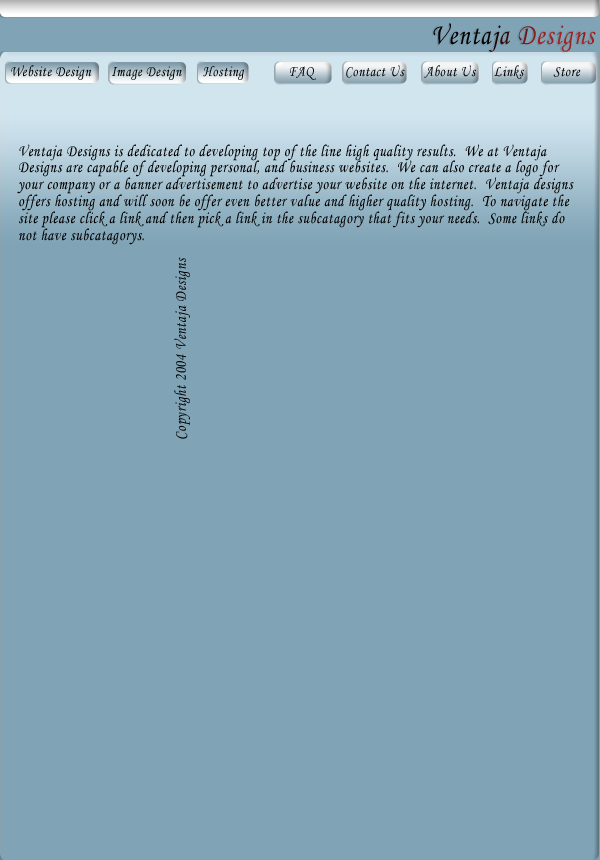
<style>
.page{position:relative;width:600px;height:860px;background:#80a4b6}
.page>*{position:absolute;margin:0}
.t1{font:30px "MonotypeCorsiva";letter-spacing:0.05em;scale:0.83 1}
.t2{font:15.6px "MonotypeCorsiva";letter-spacing:0.05em;color:#000000;scale:0.83 1}
.t3{font:16.8px "MonotypeCorsiva";letter-spacing:0.05em;color:#000000;scale:0.83 1}
</style>
<div class="page">
<p class="t1" style="left:433px;top:23px;width:163px;height:29px">Ventaja Designs</p>
<p class="t2" style="left:11px;top:65px;width:81px;height:15px">Website Design</p>
<p class="t2" style="left:346px;top:65px;width:59px;height:13px">Contact Us</p>
<p class="t2" style="left:424px;top:65px;width:52px;height:13px">About Us</p>
<p class="t2" style="left:494px;top:65px;width:30px;height:14px">Links</p>
<p class="t2" style="left:112px;top:66px;width:70px;height:14px">Image Design</p>
<p class="t2" style="left:203px;top:66px;width:42px;height:14px">Hosting</p>
<p class="t2" style="left:290px;top:66px;width:26px;height:14px">FAQ</p>
<p class="t2" style="left:553px;top:67px;width:28px;height:10px">Store</p>
<p class="t3" style="left:17px;top:144px;width:557px;height:101px">Ventaja Designs is dedicated to developing top of the line high quality results.  We at Ventaja Designs are capable of developing personal, and business websites.  We can also create a logo for your company or a banner advertisement to advertise your website on the internet.  Ventaja designs offers hosting and will soon be offer even better value and higher quality hosting.  To navigate the site please click a link and then pick a link in the subcatagory that fits your needs.  Some links do not have subcatagorys.</p>
<p class="t3" style="left:174px;top:257px;width:16px;height:182px;rotate:-90deg">Copyright 2004 Ventaja Designs</p>
</div>
